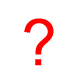
<style>
.page{position:relative;width:80px;height:80px;background:#ffffff}
.page>*{position:absolute;margin:0}
.t1{font:64px "ArialMT";color:#ff0000}
</style>
<div class="page">
<p class="t1" style="left:24px;top:18px;width:30px;height:48px">?</p>
</div>
